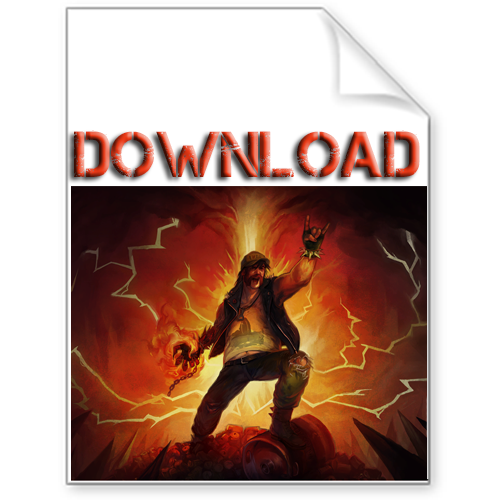
<style>
.page{position:relative;width:500px;height:500px;background:#ffffff}
.page>*{position:absolute;margin:0}
.t1{font:64.8px "Captureit"}
</style>
<div class="page">
<p class="t1" style="left:74px;top:130px;width:346px;height:47px">DOWNLOAD</p>
</div>
